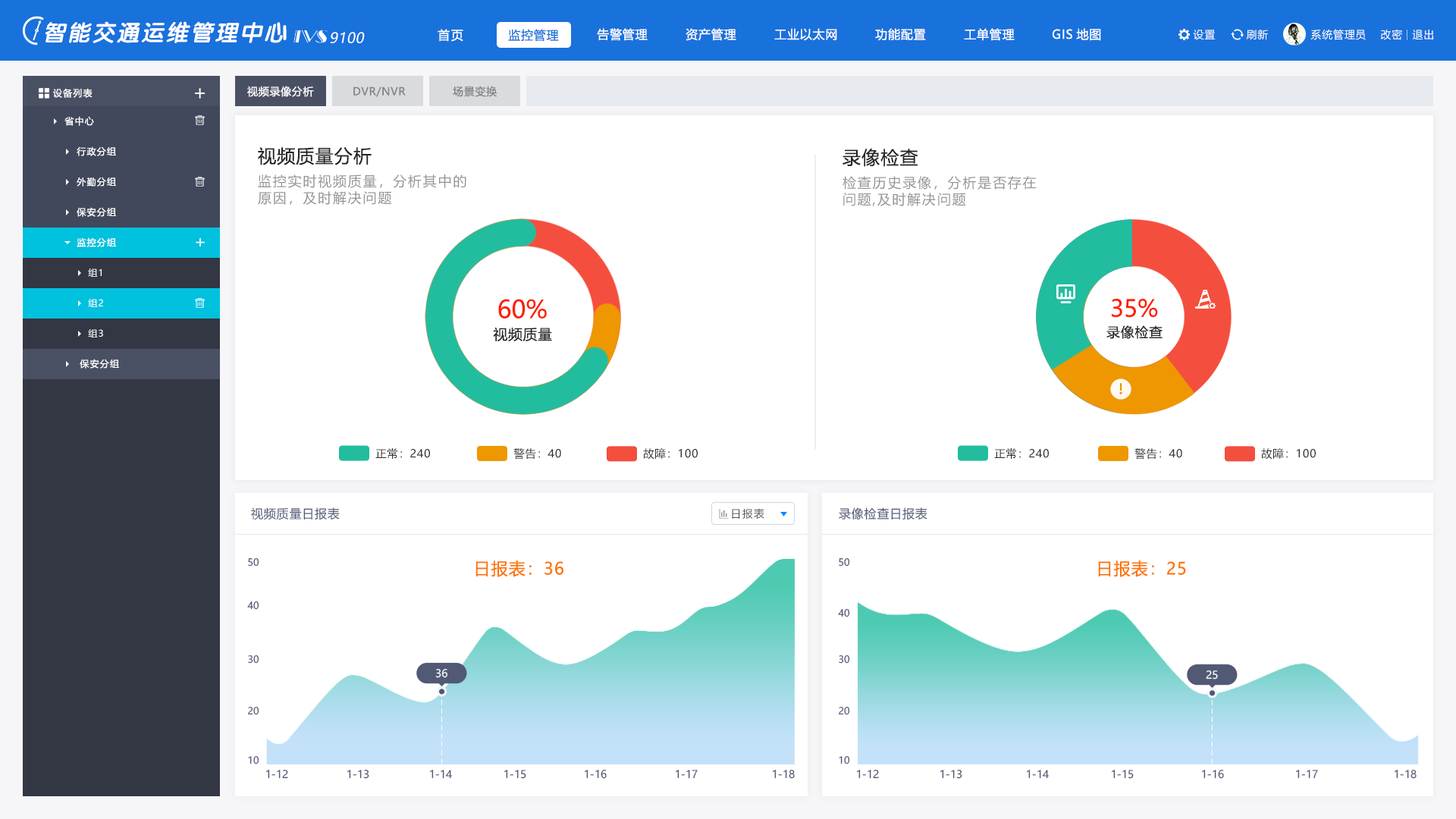
<style>
.page{position:relative;width:1456px;height:819px;background:#ffffff}
.page>*{position:absolute;margin:0}
.t1{font:22.7px "VeraSansYuanTiMono-BoldItalic";letter-spacing:0.08em;color:#ffffff}
.t2{font:12.1px "MicrosoftYaHei";letter-spacing:0.1em;color:#fefeff}
.t3{font:12.1px "MicrosoftYaHei";letter-spacing:0.05em;color:#1971dc}
.t4{font:12.1px "MicrosoftYaHei";letter-spacing:0.05em;color:#ffffff}
.t5{font:10.6px "MicrosoftYaHei";letter-spacing:0.05em;color:#ffffff}
.t6{font:14.2px "MicrosoftYaHei";letter-spacing:0.03em;color:#ffffff;font-style:italic}
.t7{font:9.1px "MicrosoftYaHei";letter-spacing:0.1em;color:#ffffff}
.t8{font:10.6px "MicrosoftYaHei";letter-spacing:0.05em;color:#7e8388}
.t9{font:18.2px "MicrosoftYaHei";letter-spacing:0.05em;color:#242424}
.t10{font:13.6px/16.7px "MicrosoftYaHei";letter-spacing:0.1em;color:#949494}
.t11{font:24.4px "MicrosoftYaHei";color:#ff1e00}
.t12{font:23.3px "MicrosoftYaHei";color:#ff1e00}
.t13{font:14.1px "MicrosoftYaHei";letter-spacing:0.05em;color:#242424}
.t14{font:13.5px "MicrosoftYaHei";letter-spacing:0.05em;color:#242424}
.t15{font:10.9px "MicrosoftYaHei";letter-spacing:0.05em;color:#303030}
.t16{font:12.1px "MicrosoftYaHei";letter-spacing:0.05em;color:#515974}
.t17{font:10.6px "MicrosoftYaHei";letter-spacing:0.1em;color:#555555}
.t18{font:9.6px "MicrosoftYaHei";color:#515974}
.t19{font:16.7px "MicrosoftYaHei";letter-spacing:0.05em;color:#ff7403}
.t20{font:10.6px "MicrosoftYaHei";color:#f2f6fc}
.t21{font:10.6px "MicrosoftYaHei";color:#515974}
</style>
<div class="page">
<p class="t1" style="left:45px;top:21px;width:242px;height:22px">智能交通运维管理中心</p>
<p class="t2" style="left:438px;top:29px;width:25px;height:13px">首页</p>
<p class="t3" style="left:508px;top:29px;width:51px;height:13px">监控管理</p>
<p class="t4" style="left:597px;top:28px;width:51px;height:13px">告警管理</p>
<p class="t4" style="left:686px;top:28px;width:50px;height:13px">资产管理</p>
<p class="t4" style="left:774px;top:28px;width:63px;height:13px">工业以太网</p>
<p class="t4" style="left:875px;top:28px;width:51px;height:13px">功能配置</p>
<p class="t4" style="left:964px;top:28px;width:51px;height:13px">工单管理</p>
<p class="t4" style="left:1053px;top:28px;width:48px;height:13px">GIS地图</p>
<p class="t5" style="left:1193px;top:30px;width:23px;height:10px">设置</p>
<p class="t5" style="left:1246px;top:29px;width:22px;height:11px">刷新</p>
<p class="t5" style="left:1310px;top:29px;width:56px;height:11px">系统管理员</p>
<p class="t5" style="left:1381px;top:29px;width:21px;height:11px">改密</p>
<p class="t5" style="left:1412px;top:30px;width:21px;height:10px">退出</p>
<p class="t6" style="left:330px;top:32px;width:35px;height:11px">9100</p>
<p class="t7" style="left:53px;top:88px;width:40px;height:10px">设备列表</p>
<p class="t5" style="left:247px;top:86px;width:67px;height:11px">视频录像分析</p>
<p class="t8" style="left:353px;top:86px;width:53px;height:11px">DVR/NVR</p>
<p class="t8" style="left:453px;top:86px;width:44px;height:11px">场景变换</p>
<p class="t7" style="left:64px;top:116px;width:30px;height:10px">省中心</p>
<p class="t7" style="left:77px;top:146px;width:39px;height:10px">行政分组</p>
<p class="t9" style="left:258px;top:147px;width:114px;height:18px">视频质量分析</p>
<p class="t9" style="left:842px;top:149px;width:76px;height:18px">录像检查</p>
<p class="t7" style="left:77px;top:177px;width:39px;height:10px">外勤分组</p>
<p class="t10" style="left:258px;top:174px;width:208px;height:31px">监控实时视频质量，分析其中的<br>原因，及时解决问题</p>
<p class="t10" style="left:842px;top:176px;width:194px;height:30px">检查历史录像，分析是否存在<br>问题,及时解决问题</p>
<p class="t7" style="left:77px;top:207px;width:39px;height:10px">保安分组</p>
<p class="t7" style="left:77px;top:237px;width:39px;height:10px">监控分组</p>
<p class="t7" style="left:88px;top:268px;width:14px;height:9px">组1</p>
<p class="t7" style="left:88px;top:299px;width:15px;height:8px">组2</p>
<p class="t11" style="left:498px;top:299px;width:49px;height:19px">60%</p>
<p class="t12" style="left:1112px;top:299px;width:46px;height:19px">35%</p>
<p class="t7" style="left:88px;top:329px;width:15px;height:8px">组3</p>
<p class="t13" style="left:493px;top:327px;width:59px;height:15px">视频质量</p>
<p class="t14" style="left:1106px;top:325px;width:57px;height:14px">录像检查</p>
<p class="t7" style="left:80px;top:359px;width:39px;height:10px">保安分组</p>
<p class="t15" style="left:375px;top:448px;width:55px;height:11px">正常：240</p>
<p class="t15" style="left:513px;top:448px;width:48px;height:12px">警告：40</p>
<p class="t15" style="left:643px;top:448px;width:55px;height:12px">故障：100</p>
<p class="t15" style="left:994px;top:448px;width:55px;height:11px">正常：240</p>
<p class="t15" style="left:1134px;top:448px;width:48px;height:12px">警告：40</p>
<p class="t15" style="left:1261px;top:448px;width:55px;height:12px">故障：100</p>
<p class="t16" style="left:251px;top:507px;width:89px;height:13px">视频质量日报表</p>
<p class="t17" style="left:732px;top:508px;width:32px;height:11px">日报表</p>
<p class="t16" style="left:839px;top:507px;width:88px;height:13px">录像检查日报表</p>
<p class="t18" style="left:248px;top:558px;width:11px;height:8px">50</p>
<p class="t19" style="left:475px;top:560px;width:88px;height:17px">日报表：36</p>
<p class="t18" style="left:839px;top:558px;width:11px;height:8px">50</p>
<p class="t19" style="left:1098px;top:560px;width:88px;height:17px">日报表：25</p>
<p class="t18" style="left:247px;top:601px;width:12px;height:9px">40</p>
<p class="t18" style="left:838px;top:609px;width:12px;height:8px">40</p>
<p class="t18" style="left:248px;top:655px;width:11px;height:9px">30</p>
<p class="t18" style="left:839px;top:655px;width:11px;height:9px">30</p>
<p class="t20" style="left:435px;top:669px;width:12px;height:9px">36</p>
<p class="t20" style="left:1206px;top:670px;width:12px;height:9px">25</p>
<p class="t18" style="left:248px;top:707px;width:11px;height:8px">20</p>
<p class="t18" style="left:839px;top:707px;width:11px;height:8px">20</p>
<p class="t18" style="left:248px;top:756px;width:11px;height:8px">10</p>
<p class="t18" style="left:839px;top:756px;width:11px;height:8px">10</p>
<p class="t21" style="left:266px;top:770px;width:22px;height:9px">1-12</p>
<p class="t21" style="left:347px;top:770px;width:22px;height:9px">1-13</p>
<p class="t21" style="left:430px;top:770px;width:23px;height:9px">1-14</p>
<p class="t21" style="left:504px;top:770px;width:22px;height:9px">1-15</p>
<p class="t21" style="left:585px;top:770px;width:22px;height:9px">1-16</p>
<p class="t21" style="left:676px;top:770px;width:22px;height:9px">1-17</p>
<p class="t21" style="left:773px;top:770px;width:22px;height:9px">1-18</p>
<p class="t21" style="left:857px;top:770px;width:22px;height:9px">1-12</p>
<p class="t21" style="left:940px;top:770px;width:22px;height:9px">1-13</p>
<p class="t21" style="left:1027px;top:770px;width:23px;height:9px">1-14</p>
<p class="t21" style="left:1112px;top:770px;width:22px;height:9px">1-15</p>
<p class="t21" style="left:1202px;top:770px;width:22px;height:9px">1-16</p>
<p class="t21" style="left:1296px;top:770px;width:22px;height:9px">1-17</p>
<p class="t21" style="left:1395px;top:770px;width:22px;height:9px">1-18</p>
</div>
